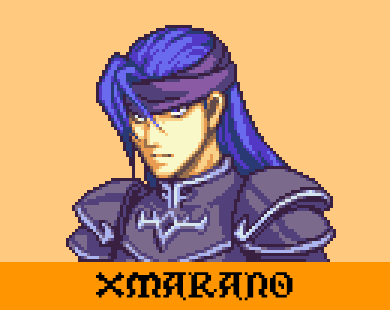
<style>
.page{position:relative;width:390px;height:310px;background:#ffc97f}
.page>*{position:absolute;margin:0}
.t1{font:44.9px "MedievalPixel";color:#000000}
</style>
<div class="page">
<p class="t1" style="left:96px;top:272px;width:197px;height:29px">XMARANO</p>
</div>
